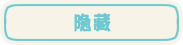
<style>
.page{position:relative;width:183px;height:45px;background:#f7f3e9}
.page>*{position:absolute;margin:0}
.t1{font:12px "shetumodengxiaofangti";color:#6ecad0;font-weight:bold;scale:0.94 1}
</style>
<div class="page">
<p class="t1" style="left:74px;top:13px;width:37px;height:19px">隐藏</p>
</div>
